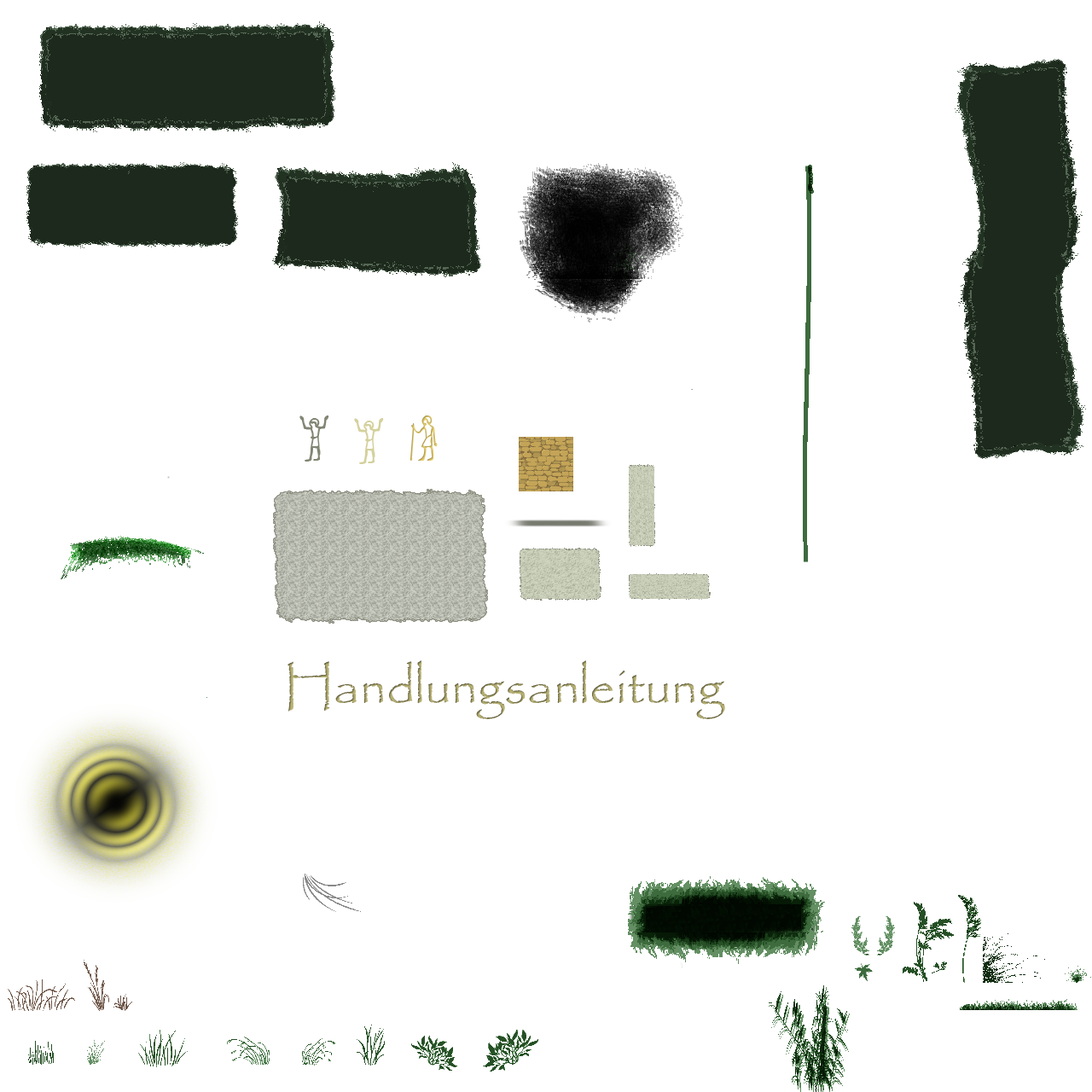
<style>
.page{position:relative;width:1092px;height:1092px;background:#ffffff}
.page>*{position:absolute;margin:0}
.t1{font:51.2px "KingTut1";color:#818673}
.t2{font:51.2px "KingTut1";color:#d4d19d}
.t3{font:51.2px "KingTut1";color:#ceb862}
.t4{font:51.2px "Papyrus-Regular"}
</style>
<div class="page">
<p class="t1" style="left:299px;top:415px;width:30px;height:47px">U</p>
<p class="t2" style="left:354px;top:418px;width:30px;height:46px">U</p>
<p class="t3" style="left:410px;top:415px;width:28px;height:47px">J</p>
<p class="t4" style="left:287px;top:660px;width:438px;height:59px">Handlungsanleitung</p>
</div>
